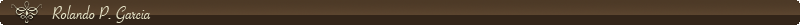
<style>
.page{position:relative;width:800px;height:25px;background:#332519}
.page>*{position:absolute;margin:0}
.t1{font:20px "SavoyeLetPlain";color:#e2dfc3}
</style>
<div class="page">
<p class="t1" style="left:52px;top:5px;width:99px;height:18px">Rolando P. Garcia</p>
</div>
